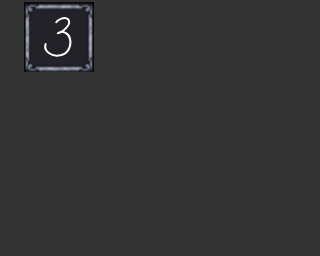
<style>
.page{position:relative;width:320px;height:256px;background:#333333}
.page>*{position:absolute;margin:0}
.t1{font:43px "BadScript-Regular";color:#ffffff}
</style>
<div class="page">
<p class="t1" style="left:44px;top:17px;width:28px;height:40px">3</p>
</div>
